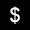
<style>
.page{position:relative;width:30px;height:30px;background:#000000}
.page>*{position:absolute;margin:0}
.t1{font:20px "ArialMT";letter-spacing:0.1em;color:#fefefe}
</style>
<div class="page">
<p class="t1" style="left:10px;top:6px;width:10px;height:18px">$</p>
</div>
